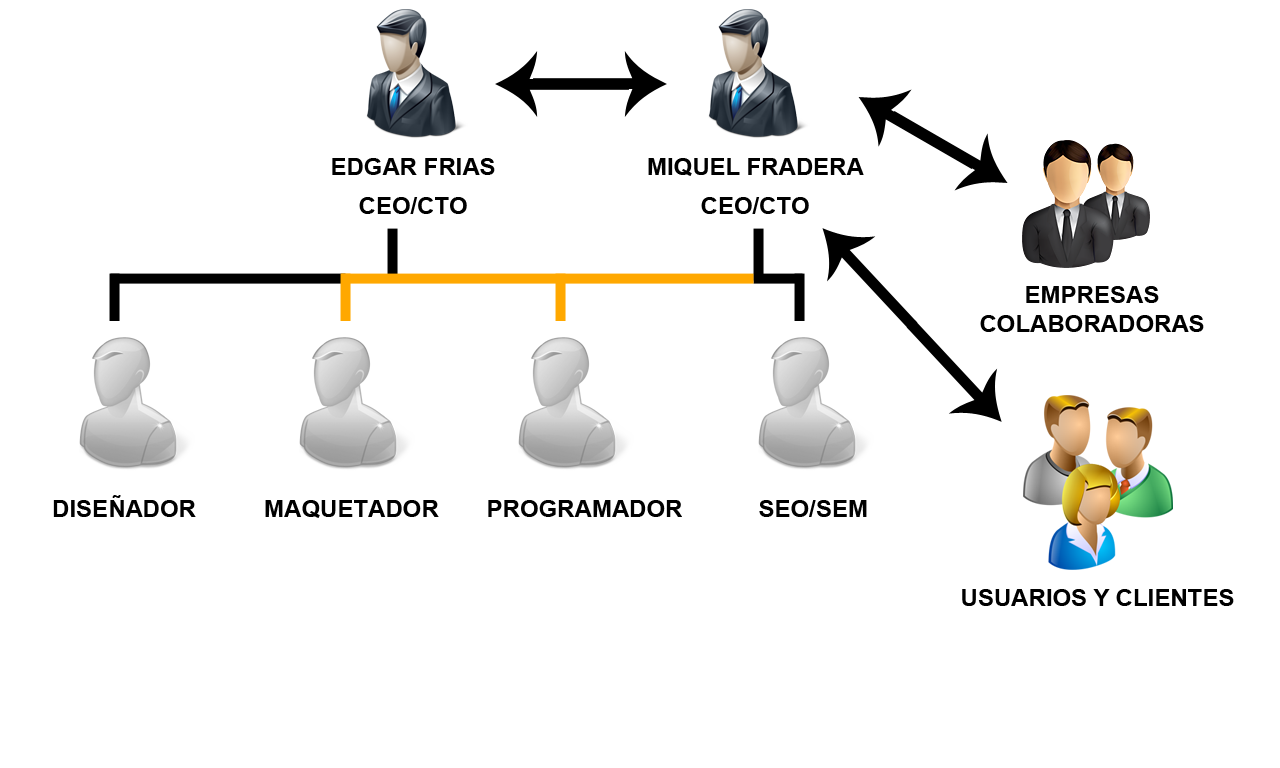
<style>
.page{position:relative;width:1280px;height:768px;background:#ffffff}
.page>*{position:absolute;margin:0}
.t1{font:24px "Arial-BoldMT";color:#000000}
</style>
<div class="page">
<p class="t1" style="left:332px;top:158px;width:163px;height:56px;text-align:center">EDGAR FRIAS<br>CEO/CTO</p>
<p class="t1" style="left:648px;top:158px;width:216px;height:56px;text-align:center">MIQUEL FRADERA<br>CEO/CTO</p>
<p class="t1" style="left:980px;top:286px;width:224px;height:46px;text-align:center">EMPRESAS COLABORADORAS</p>
<p class="t1" style="left:53px;top:495px;width:143px;height:22px">DISEÑADOR</p>
<p class="t1" style="left:265px;top:500px;width:174px;height:18px">MAQUETADOR</p>
<p class="t1" style="left:488px;top:500px;width:194px;height:17px">PROGRAMADOR</p>
<p class="t1" style="left:759px;top:500px;width:108px;height:17px">SEO/SEM</p>
<p class="t1" style="left:962px;top:589px;width:272px;height:17px">USUARIOS Y CLIENTES</p>
</div>
